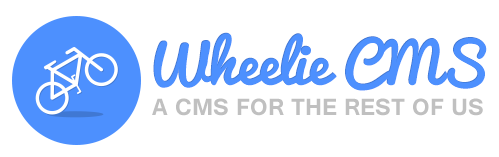
<style>
.page{position:relative;width:499px;height:157px;background:#ffffff}
.page>*{position:absolute;margin:0}
.t1{font:55.3px "Pacifico";color:#4d90fe}
.t2{font:29.4px "Tunga-Bold";color:#bfbfbf;text-transform:uppercase}
</style>
<div class="page">
<p class="t1" style="left:153px;top:32px;width:333px;height:58px">Wheelie CMS</p>
<p class="t1" style="left:154px;top:33px;width:333px;height:58px">Wheelie CMS</p>
<p class="t2" style="left:152px;top:98px;width:331px;height:18px">a cms for the rest of us</p>
</div>
